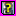
<style>
.page{position:relative;width:16px;height:16px;background:#ff00ff}
.page>*{position:absolute;margin:0}
.t1{font:12px "Calibri-Bold";color:#f6ff00}
</style>
<div class="page">
<p class="t1" style="left:6px;top:3px;width:5px;height:9px">?</p>
</div>
